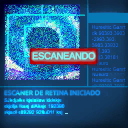
<style>
.page{position:relative;width:128px;height:128px}
.page>*{position:absolute;margin:0}
.t1{font:9.6px "ArialMT";letter-spacing:-0.04em;color:#7bfbf7;font-weight:bold;scale:0.96 1}
.t2{font:6.1px "NotoSansSymbols-Regular";scale:1.09 1}
</style>
<div class="page">
<p class="t1" style="left:32px;top:52px;width:64px;height:8px">ESCANEANDO</p>
<p class="t2" style="left:4px;top:90px;width:96px;height:6px">ESCANER DE RETINA INICIADO</p>
</div>
